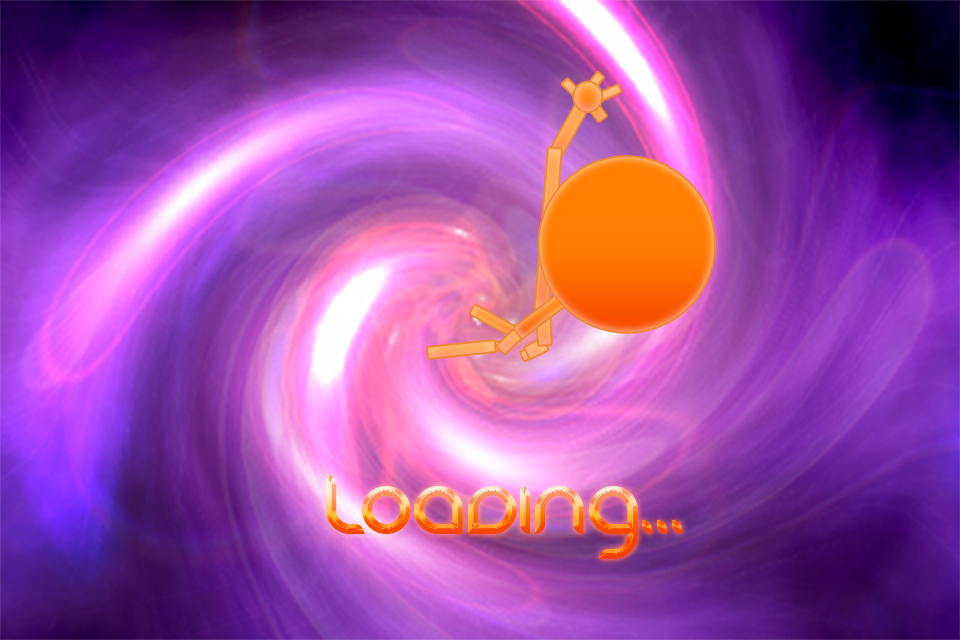
<style>
.page{position:relative;width:960px;height:640px}
.page>*{position:absolute;margin:0}
.t1{font:60px "Danube"}
</style>
<div class="page">
<p class="t1" style="left:326px;top:474px;width:357px;height:85px">loading...</p>
</div>
